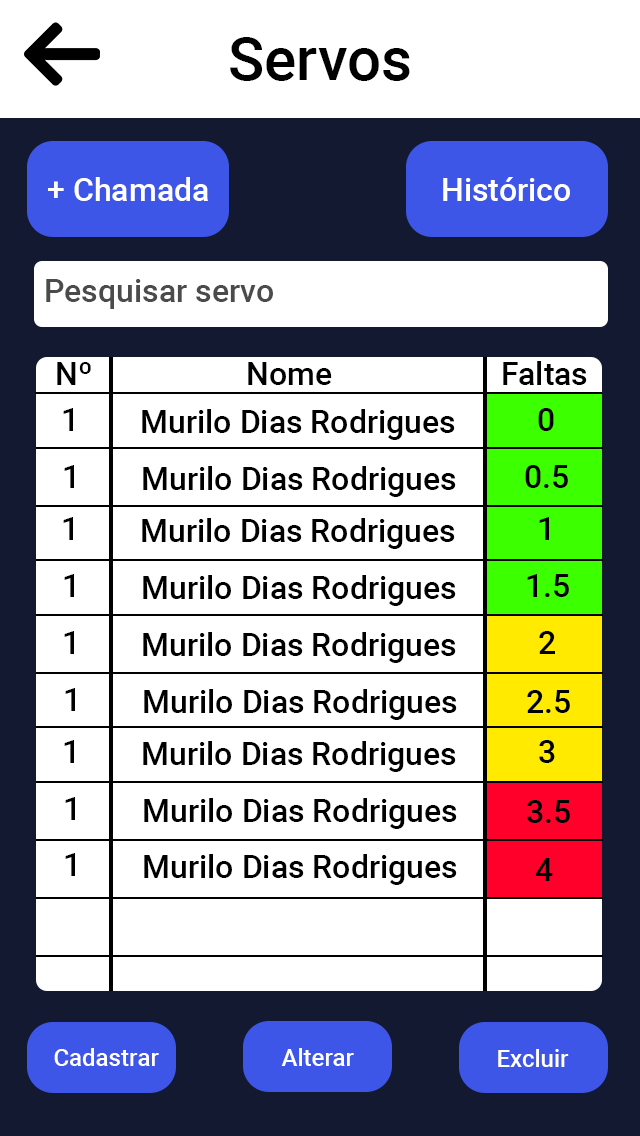
<style>
.page{position:relative;width:640px;height:1136px;background:#ffffff}
.page>*{position:absolute;margin:0}
.t1{font:60px "Roboto-Medium";color:#000000}
.t2{font:32px "Roboto-Medium";color:#ffffff}
.t3{font:32px "Roboto-Medium";color:#4b4b4b}
.t4{font:32px "Roboto-Medium";color:#000000}
.t5{font:24.2px "Roboto-Medium";color:#ffffff}
</style>
<div class="page">
<p class="t1" style="left:230px;top:37px;width:180px;height:44px">Servos</p>
<p class="t2" style="left:48px;top:177px;width:160px;height:24px">+ Chamada</p>
<p class="t2" style="left:443px;top:177px;width:127px;height:24px">Histórico</p>
<p class="t3" style="left:46px;top:279px;width:227px;height:30px">Pesquisar servo</p>
<p class="t4" style="left:57px;top:362px;width:34px;height:23px">Nº</p>
<p class="t4" style="left:248px;top:362px;width:84px;height:23px">Nome</p>
<p class="t4" style="left:503px;top:361px;width:84px;height:24px">Faltas</p>
<p class="t4" style="left:63px;top:408px;width:10px;height:23px">1</p>
<p class="t4" style="left:142px;top:409px;width:313px;height:31px">Murilo Dias Rodrigues</p>
<p class="t4" style="left:538px;top:408px;width:16px;height:23px">0</p>
<p class="t4" style="left:64px;top:465px;width:10px;height:23px">1</p>
<p class="t4" style="left:143px;top:466px;width:313px;height:31px">Murilo Dias Rodrigues</p>
<p class="t4" style="left:525px;top:465px;width:43px;height:23px">0.5</p>
<p class="t4" style="left:63px;top:517px;width:10px;height:23px">1</p>
<p class="t4" style="left:142px;top:518px;width:313px;height:31px">Murilo Dias Rodrigues</p>
<p class="t4" style="left:539px;top:517px;width:10px;height:23px">1</p>
<p class="t4" style="left:64px;top:574px;width:10px;height:23px">1</p>
<p class="t4" style="left:143px;top:575px;width:313px;height:31px">Murilo Dias Rodrigues</p>
<p class="t4" style="left:527px;top:574px;width:42px;height:23px">1.5</p>
<p class="t4" style="left:64px;top:631px;width:10px;height:23px">1</p>
<p class="t4" style="left:143px;top:632px;width:313px;height:31px">Murilo Dias Rodrigues</p>
<p class="t4" style="left:539px;top:631px;width:16px;height:23px">2</p>
<p class="t4" style="left:65px;top:688px;width:10px;height:23px">1</p>
<p class="t4" style="left:144px;top:689px;width:313px;height:31px">Murilo Dias Rodrigues</p>
<p class="t4" style="left:527px;top:690px;width:43px;height:23px">2.5</p>
<p class="t4" style="left:64px;top:740px;width:10px;height:23px">1</p>
<p class="t4" style="left:143px;top:741px;width:313px;height:31px">Murilo Dias Rodrigues</p>
<p class="t4" style="left:539px;top:740px;width:16px;height:23px">3</p>
<p class="t4" style="left:65px;top:797px;width:10px;height:23px">1</p>
<p class="t4" style="left:144px;top:798px;width:313px;height:31px">Murilo Dias Rodrigues</p>
<p class="t4" style="left:527px;top:800px;width:43px;height:23px">3.5</p>
<p class="t4" style="left:65px;top:853px;width:10px;height:23px">1</p>
<p class="t4" style="left:144px;top:854px;width:313px;height:31px">Murilo Dias Rodrigues</p>
<p class="t4" style="left:535px;top:858px;width:18px;height:23px">4</p>
<p class="t5" style="left:54px;top:1048px;width:105px;height:18px">Cadastrar</p>
<p class="t5" style="left:281px;top:1048px;width:73px;height:18px">Alterar</p>
<p class="t5" style="left:498px;top:1049px;width:71px;height:18px">Excluir</p>
</div>
